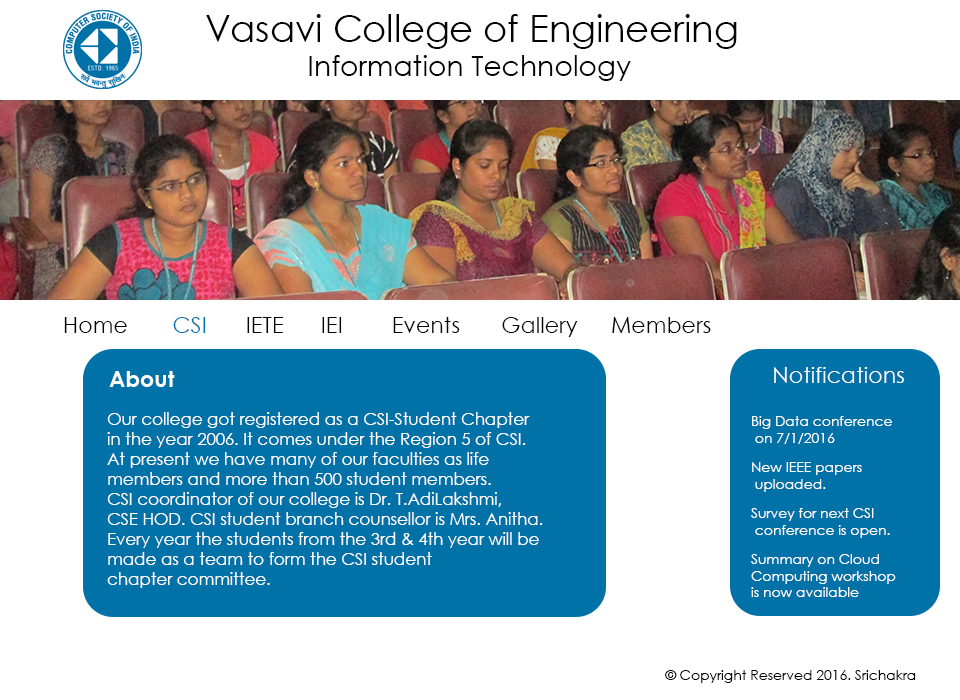
<style>
.page{position:relative;width:960px;height:700px;background:#ffffff}
.page>*{position:absolute;margin:0}
.t1{font:36.6px "CenturyGothic";color:#030303}
.t2{font:28.2px "CenturyGothic";color:#030303}
.t3{font:22.2px "CenturyGothic";color:#030303}
.t4{font:22.2px "CenturyGothic";color:#000000}
.t5{font:22.2px "CenturyGothic";color:#0072a8}
.t6{font:22.2px "CenturyGothic-Bold";color:#ffffff}
.t7{font:22.2px "CenturyGothic";color:#ffffff}
.t8{font:16.7px "CenturyGothic";color:#ffffff}
.t9{font:13.9px/16.7px "CenturyGothic";color:#ffffff}
.t10{font:13.9px "CenturyGothic";color:#010101}
</style>
<div class="page">
<p class="t1" style="left:206px;top:14px;width:531px;height:35px">Vasavi College of Engineering</p>
<p class="t2" style="left:309px;top:55px;width:322px;height:26px">Information Technology</p>
<p class="t3" style="left:64px;top:317px;width:647px;height:20px"><span class="t4">Home  </span><span class="t5">CSI </span> IETE      IEI  Events  Gallery Members</p>
<p class="t6" style="left:109px;top:371px;width:66px;height:16px">About</p>
<p class="t7" style="left:774px;top:367px;width:130px;height:16px">Notifications</p>
<p class="t8" style="left:107px;top:412px;width:436px;height:176px">Our college got registered as a CSI-Student Chapter<br>in the year 2006. It comes under the Region 5 of CSI. <br>At present we have many of our faculties as life <br>members and more than 500 student members.<br>CSI coordinator of our college is Dr. T.AdiLakshmi,<br>CSE HOD. CSI student branch counsellor is Mrs. Anitha. <br>Every year the students from the 3rd &amp; 4th year will be<br>made as a team to form the CSI student<br>chapter committee.</p>
<p class="t9" style="left:752px;top:416px;width:140px;height:28px">Big Data conference<br> on 7/1/2016</p>
<p class="t9" style="left:752px;top:462px;width:110px;height:30px">New IEEE papers <br> uploaded.</p>
<p class="t9" style="left:751px;top:508px;width:139px;height:30px">Survey for next CSI <br> conference is open.</p>
<p class="t9" style="left:751px;top:554px;width:145px;height:43px">Summary on Cloud <br>Computing workshop <br>is now available</p>
<p class="t10" style="left:665px;top:670px;width:251px;height:13px">© Copyright Reserved 2016. Srichakra</p>
</div>
